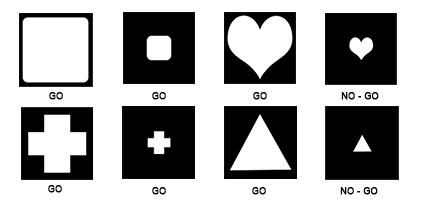
<style>
.page{position:relative;width:430px;height:210px;background:#ffffff}
.page>*{position:absolute;margin:0}
.t1{font:10.5px "ArialMT";color:#000000;font-weight:bold;scale:0.87 1}
</style>
<div class="page">
<p class="t1" style="left:49px;top:92px;width:14px;height:8px">GO</p>
<p class="t1" style="left:152px;top:92px;width:14px;height:8px">GO</p>
<p class="t1" style="left:253px;top:92px;width:14px;height:8px">GO</p>
<p class="t1" style="left:341px;top:92px;width:38px;height:8px">NO - GO</p>
<p class="t1" style="left:48px;top:185px;width:14px;height:8px">GO</p>
<p class="t1" style="left:152px;top:187px;width:14px;height:8px">GO</p>
<p class="t1" style="left:252px;top:187px;width:14px;height:8px">GO</p>
<p class="t1" style="left:340px;top:187px;width:38px;height:8px">NO - GO</p>
</div>
